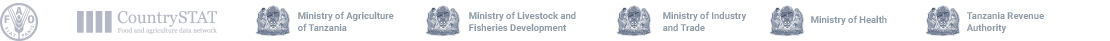
<style>
.page{position:relative;width:1110px;height:41px;background:#ffffff}
.page>*{position:absolute;margin:0}
.t1{font:9.6px "Roboto-Bold";color:#8f9ca6}
</style>
<div class="page">
<p class="t1" style="left:298px;top:11px;width:96px;height:20px">Ministry of Agriculture<br>of Tanzania</p>
<p class="t1" style="left:469px;top:11px;width:107px;height:22px">Ministry of Livestock and <br>Fisheries Development</p>
<p class="t1" style="left:663px;top:11px;width:84px;height:20px">Ministry of Industry <br>and Trade</p>
<p class="t1" style="left:811px;top:15px;width:76px;height:10px">Ministry of Health</p>
<p class="t1" style="left:966px;top:12px;width:78px;height:21px">Tanzania Revenue <br>Authority</p>
</div>
